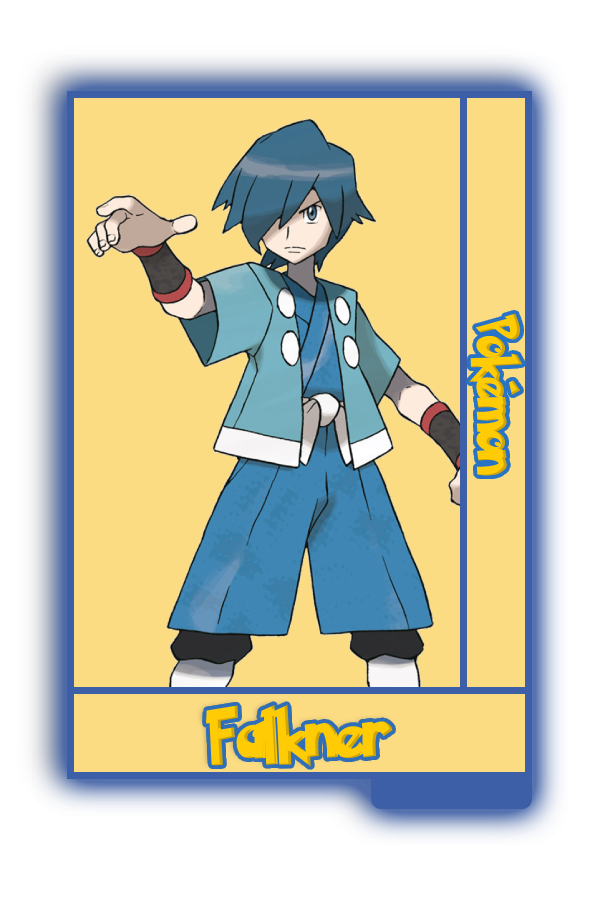
<style>
.page{position:relative;width:600px;height:900px;background:#fbdc83}
.page>*{position:absolute;margin:0}
.t1{font:48.8px "PokemonSolidNormal";color:#ffcb05;scale:0.8 1}
.t2{font:56.6px "PokemonSolidNormal";color:#ffcb05;scale:0.92 1}
</style>
<div class="page">
<p class="t1" style="left:469px;top:313px;width:54px;height:163px;rotate:90deg">Pokémon</p>
<p class="t2" style="left:206px;top:704px;width:187px;height:63px">Falkner</p>
</div>
